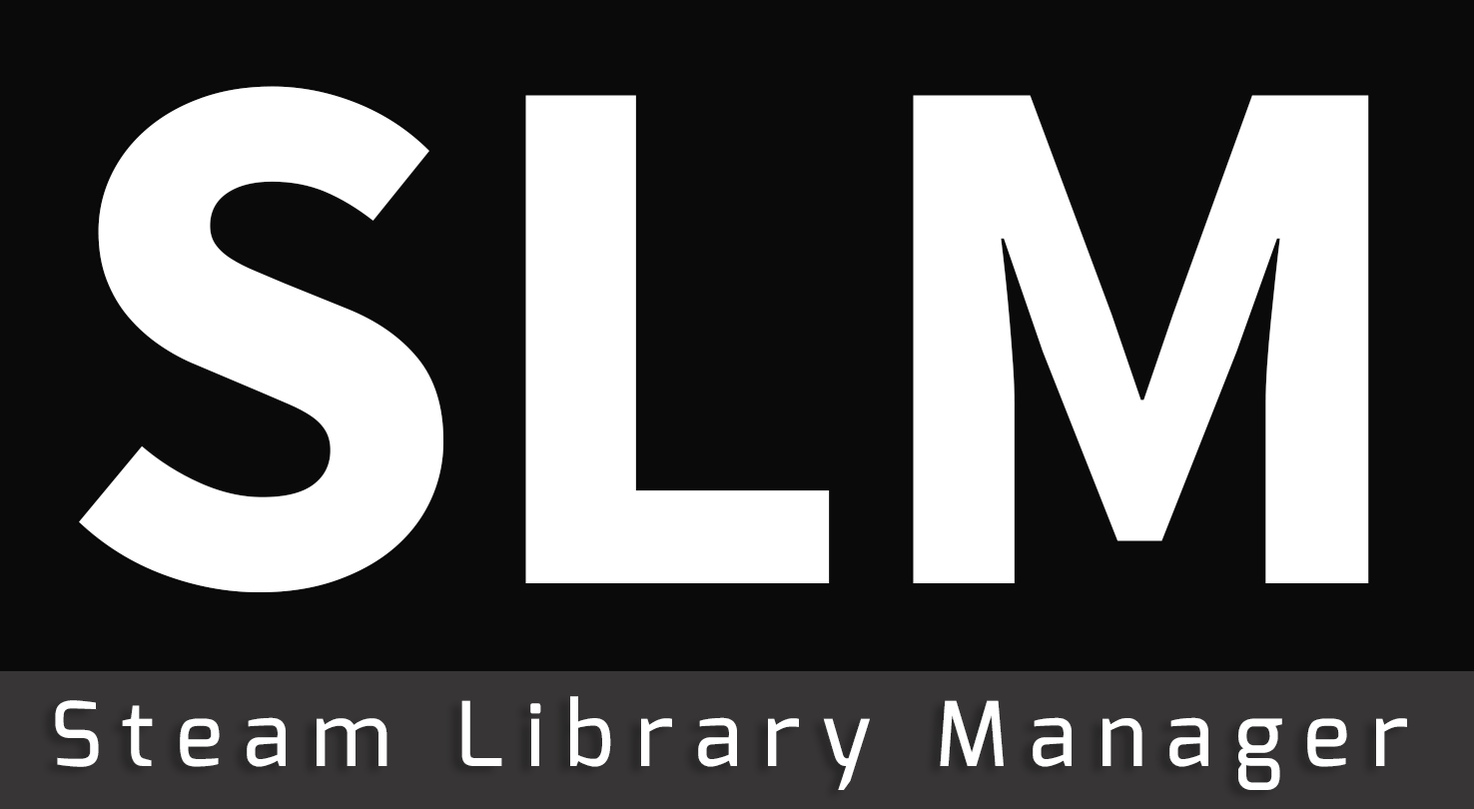
<style>
.page{position:relative;width:1474px;height:809px;background:#0a0a0a}
.page>*{position:absolute;margin:0}
.t1{font:748px "SourceSansPro-Bold";color:#ffffff}
.t2{font:88.9px "Exo-Medium";letter-spacing:0.24em;color:#ffffff}
</style>
<div class="page">
<p class="t1" style="left:79px;top:86px;width:1290px;height:506px">SLM</p>
<p class="t2" style="left:55px;top:696px;width:1352px;height:94px">Steam Library Manager</p>
</div>
